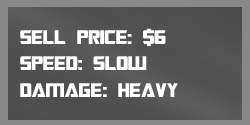
<style>
.page{position:relative;width:250px;height:125px}
.page>*{position:absolute;margin:0}
.t1{font:22px "TransformersMovie";color:#ffffff}
.t2{font:22px "TransformersMovie";letter-spacing:0.02em;color:#ffffff}
</style>
<div class="page">
<p class="t1" style="left:20px;top:28px;width:158px;height:69px">sell price: $6<br>spee<span class="t2">d</span>: slow<br>dama<span class="t2">ge</span>: heavy</p>
</div>
